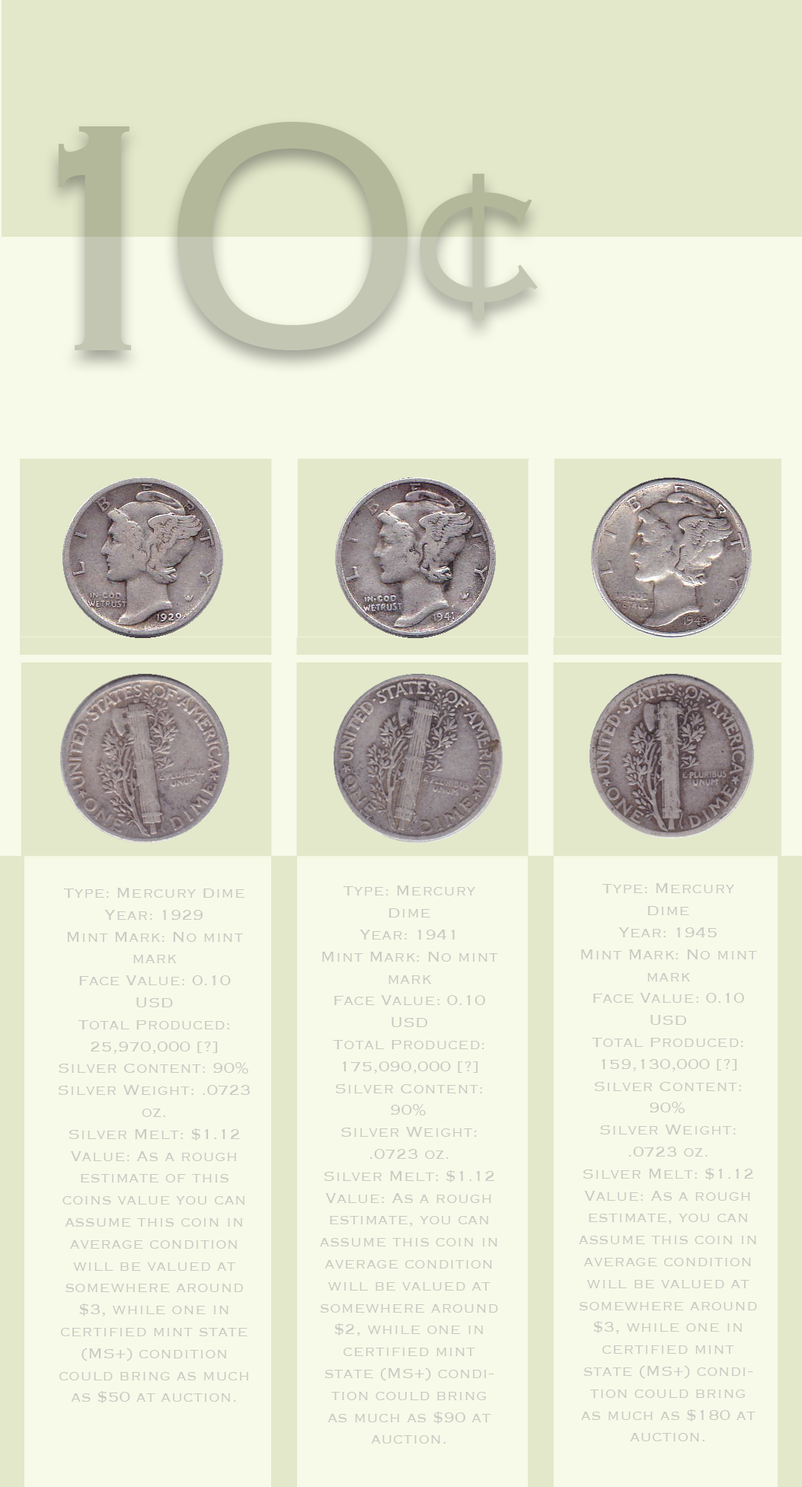
<style>
.page{position:relative;width:802px;height:1487px;background:#f7fae8}
.page>*{position:absolute;margin:0}
.t1{font:425.5px "Copperplate-Light"}
.t2{font:18.3px "Copperplate-Light";color:#c9cac4}
</style>
<div class="page">
<p class="t1" style="left:177px;top:122px;width:230px;height:228px">0</p>
<p class="t1" style="left:58px;top:126px;width:73px;height:224px">1</p>
<p class="t2" style="left:58px;top:888px;width:192px;height:515px;text-align:center">Type: Mercury Dime<br>Year: 1929<br>Mint Mark: No mint mark<br>Face Value: 0.10 USD<br>Total Produced: 25,970,000 [?]<br>Silver Content: 90% <br>Silver Weight: .0723 oz.<br>Silver Melt: $1.12<br>Value: As a rough estimate of this coins value you can assume this coin in average condition will be valued at somewhere around $3, while one in certified mint state (MS+) condition could bring as much as $50 at auction.</p>
<p class="t2" style="left:320px;top:886px;width:178px;height:558px;text-align:center">Type: Mercury Dime<br>Year: 1941<br>Mint Mark: No mint mark<br>Face Value: 0.10 USD<br>Total Produced: 175,090,000 [?]<br>Silver Content: 90% <br>Silver Weight: .0723 oz.<br>Silver Melt: $1.12<br>Value: As a rough estimate, you can assume this coin in average condition will be valued at somewhere around $2, while one in certified mint state (MS+) condition could bring as much as $90 at auction.</p>
<p class="t2" style="left:579px;top:883px;width:178px;height:558px;text-align:center">Type: Mercury Dime<br>Year: 1945<br>Mint Mark: No mint mark<br>Face Value: 0.10 USD<br>Total Produced: 159,130,000 [?]<br>Silver Content: 90% <br>Silver Weight: .0723 oz.<br>Silver Melt: $1.12<br>Value: As a rough estimate, you can assume this coin in average condition will be valued at somewhere around $3, while one in certified mint state (MS+) condition could bring as much as $180 at auction.</p>
</div>
